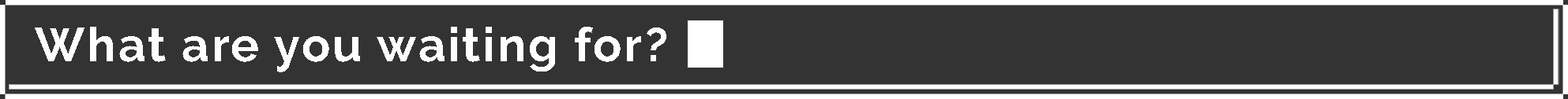
<style>
.page{position:relative;width:1568px;height:99px;background:#333333}
.page>*{position:absolute;margin:0}
.t1{font:47.4px "Raleway-Bold";letter-spacing:0.05em;color:#fefefe}
</style>
<div class="page">
<p class="t1" style="left:35px;top:27px;width:631px;height:46px">What are you waiting for?</p>
</div>
